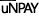
<style>
.page{position:relative;width:39px;height:16px;background:#ffffff}
.page>*{position:absolute;margin:0}
.t1{font:14px "MalgunGothicRegular";letter-spacing:-0.1em;color:#000000;font-weight:bold}
</style>
<div class="page">
<p class="t1" style="left:1px;top:2px;width:38px;height:12px">uNPAY</p>
</div>
